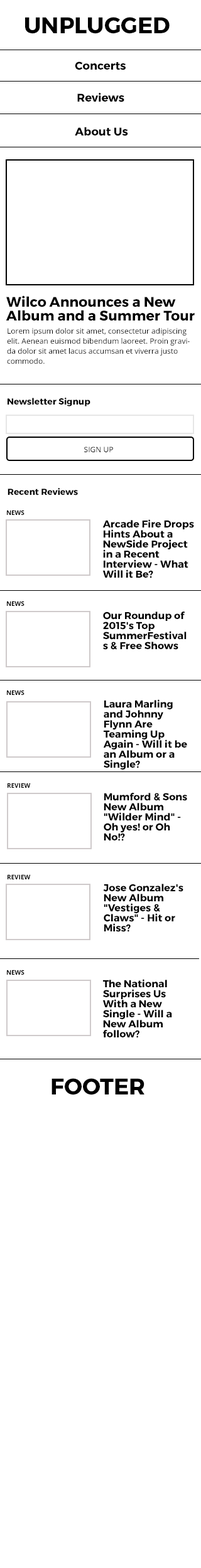
<style>
.page{position:relative;width:201px;height:1568px;background:#ffffff}
.page>*{position:absolute;margin:0}
.t1{font:22.6px "Montserrat-Bold";color:#000000}
.t2{font:11.3px "Montserrat-Bold";color:#000000}
.t3{font:13.8px/13.8px "Montserrat-Bold";color:#000000}
.t4{font:7.5px/10px "OpenSans";color:#000000}
.t5{font:8.8px "Montserrat-Bold";color:#000000}
.t6{font:7.5px "OpenSans";color:#000000}
.t7{font:6.3px "OpenSans-Bold";color:#000000}
.t8{font:10px/10px "Montserrat-Bold";color:#000000}
</style>
<div class="page">
<p class="t1" style="left:25px;top:17px;width:144px;height:17px">UNPLUGGED</p>
<p class="t2" style="left:75px;top:61px;width:50px;height:9px">Concerts</p>
<p class="t2" style="left:77px;top:93px;width:47px;height:9px">Reviews</p>
<p class="t2" style="left:75px;top:127px;width:53px;height:9px">About Us</p>
<p class="t3" style="left:6px;top:295px;width:188px;height:26px">Wilco Announces a New <br>Album and a Summer Tour</p>
<p class="t4" style="left:7px;top:328px;width:182px;height:36px">Lorem ipsum dolor sit amet, consectetur adipiscing elit. Aenean euismod bibendum laoreet. Proin gravida dolor sit amet lacus accumsan et viverra justo commodo.</p>
<p class="t5" style="left:8px;top:398px;width:82px;height:8px">Newsletter Signup</p>
<p class="t6" style="left:84px;top:447px;width:29px;height:5px">SIGN UP</p>
<p class="t5" style="left:8px;top:488px;width:70px;height:7px">Recent Reviews</p>
<p class="t7" style="left:7px;top:510px;width:17px;height:5px">NEWS</p>
<p class="t8" style="left:102px;top:519px;width:92px;height:59px">Arcade Fire Drops<br>Hints About a NewSide Project in a Recent Interview - What Will it Be?</p>
<p class="t7" style="left:7px;top:601px;width:17px;height:5px">NEWS</p>
<p class="t8" style="left:103px;top:612px;width:83px;height:38px">Our Roundup of 2015's Top<br>SummerFestivals &amp; Free Shows</p>
<p class="t7" style="left:7px;top:690px;width:17px;height:5px">NEWS</p>
<p class="t8" style="left:103px;top:699px;width:84px;height:71px">Laura Marling and Johnny Flynn Are<br>Teaming Up Again - Will it be an Album or a Single?</p>
<p class="t7" style="left:8px;top:783px;width:23px;height:5px">REVIEW</p>
<p class="t8" style="left:103px;top:793px;width:84px;height:48px">Mumford &amp; Sons New Album "Wilder Mind" - <br>Oh yes! or Oh No!?</p>
<p class="t7" style="left:8px;top:874px;width:23px;height:5px">REVIEW</p>
<p class="t8" style="left:103px;top:884px;width:80px;height:48px">Jose Gonzalez's New Album  "Vestiges &amp; Claws" - Hit or Miss?</p>
<p class="t7" style="left:7px;top:970px;width:17px;height:5px">NEWS</p>
<p class="t8" style="left:102px;top:979px;width:70px;height:59px">The National Surprises Us With a New Single - Will a New Album follow?</p>
<p class="t1" style="left:51px;top:1078px;width:93px;height:17px">FOOTER</p>
</div>
